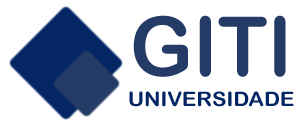
<style>
.page{position:relative;width:300px;height:125px;background:#ffffff}
.page>*{position:absolute;margin:0}
.t1{font:82.3px "ArialRoundedMTBold";color:#243b65;scale:0.97 1}
.t2{font:20px "ArialRoundedMTBold";color:#042665;scale:1.08 1}
</style>
<div class="page">
<p class="t1" style="left:133px;top:15px;width:153px;height:62px">GITI</p>
<p class="t2" style="left:129px;top:91px;width:165px;height:16px">UNIVERSIDADE</p>
</div>
